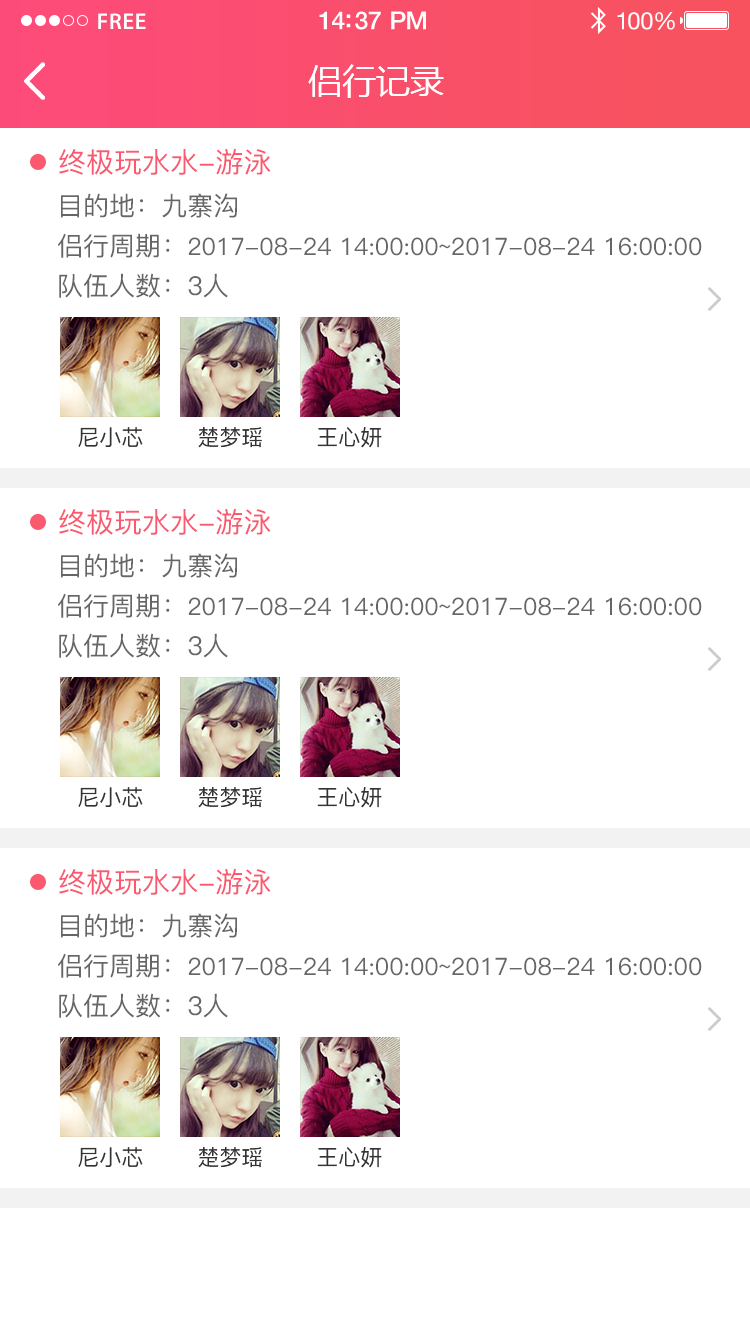
<style>
.page{position:relative;width:750px;height:1336px;background:#ffffff}
.page>*{position:absolute;margin:0}
.t1{font:23px "MyriadPro-Semibold";letter-spacing:0.02em;color:#ffffff}
.t2{font:25px "HelveticaNeue-Medium";letter-spacing:-0.02em;color:#ffffff}
.t3{font:24px "HelveticaNeue";letter-spacing:-0.02em;color:#ffffff}
.t4{font:34px "MicrosoftYaHei";color:#ffffff;text-transform:uppercase}
.t5{font:28px "PingFang-SC-Medium";color:#fa5970;text-transform:uppercase}
.t6{font:26px "PingFang-SC-Medium";color:#666666;text-transform:uppercase}
.t7{font:24px "PingFang-SC-Medium";color:#666666;text-transform:uppercase}
.t8{font:22px "PingFang-SC-Medium";color:#333333;text-transform:uppercase}
</style>
<div class="page">
<p class="t1" style="left:98px;top:13px;width:48px;height:16px">FREE</p>
<p class="t2" style="left:319px;top:11px;width:107px;height:19px">14:37 PM</p>
<p class="t3" style="left:617px;top:12px;width:58px;height:18px">100%</p>
<p class="t4" style="left:308px;top:64px;width:136px;height:34px">侣行记录</p>
<p class="t5" style="left:59px;top:149px;width:212px;height:26px">终极玩水水-游泳</p>
<p class="t6" style="left:61px;top:193px;width:176px;height:25px">目的地：九寨沟</p>
<p class="t7" style="left:58px;top:233px;width:644px;height:25px"><span class="t6">侣行周期：</span>2017-08-24 14:00:00~2017-08-24 16:00:00</p>
<p class="t6" style="left:59px;top:273px;width:169px;height:25px">队伍人数：3人</p>
<p class="t8" style="left:78px;top:427px;width:65px;height:20px">尼小芯</p>
<p class="t8" style="left:198px;top:427px;width:64px;height:21px">楚梦瑶</p>
<p class="t8" style="left:317px;top:427px;width:65px;height:21px">王心妍</p>
<p class="t5" style="left:59px;top:509px;width:212px;height:26px">终极玩水水-游泳</p>
<p class="t6" style="left:61px;top:553px;width:176px;height:25px">目的地：九寨沟</p>
<p class="t7" style="left:58px;top:593px;width:644px;height:25px"><span class="t6">侣行周期：</span>2017-08-24 14:00:00~2017-08-24 16:00:00</p>
<p class="t6" style="left:59px;top:633px;width:169px;height:25px">队伍人数：3人</p>
<p class="t8" style="left:78px;top:787px;width:65px;height:20px">尼小芯</p>
<p class="t8" style="left:198px;top:787px;width:64px;height:21px">楚梦瑶</p>
<p class="t8" style="left:317px;top:787px;width:65px;height:21px">王心妍</p>
<p class="t5" style="left:59px;top:869px;width:212px;height:26px">终极玩水水-游泳</p>
<p class="t6" style="left:61px;top:913px;width:176px;height:25px">目的地：九寨沟</p>
<p class="t7" style="left:58px;top:953px;width:644px;height:25px"><span class="t6">侣行周期：</span>2017-08-24 14:00:00~2017-08-24 16:00:00</p>
<p class="t6" style="left:59px;top:993px;width:169px;height:25px">队伍人数：3人</p>
<p class="t8" style="left:78px;top:1147px;width:65px;height:20px">尼小芯</p>
<p class="t8" style="left:198px;top:1147px;width:64px;height:21px">楚梦瑶</p>
<p class="t8" style="left:317px;top:1147px;width:65px;height:21px">王心妍</p>
</div>
